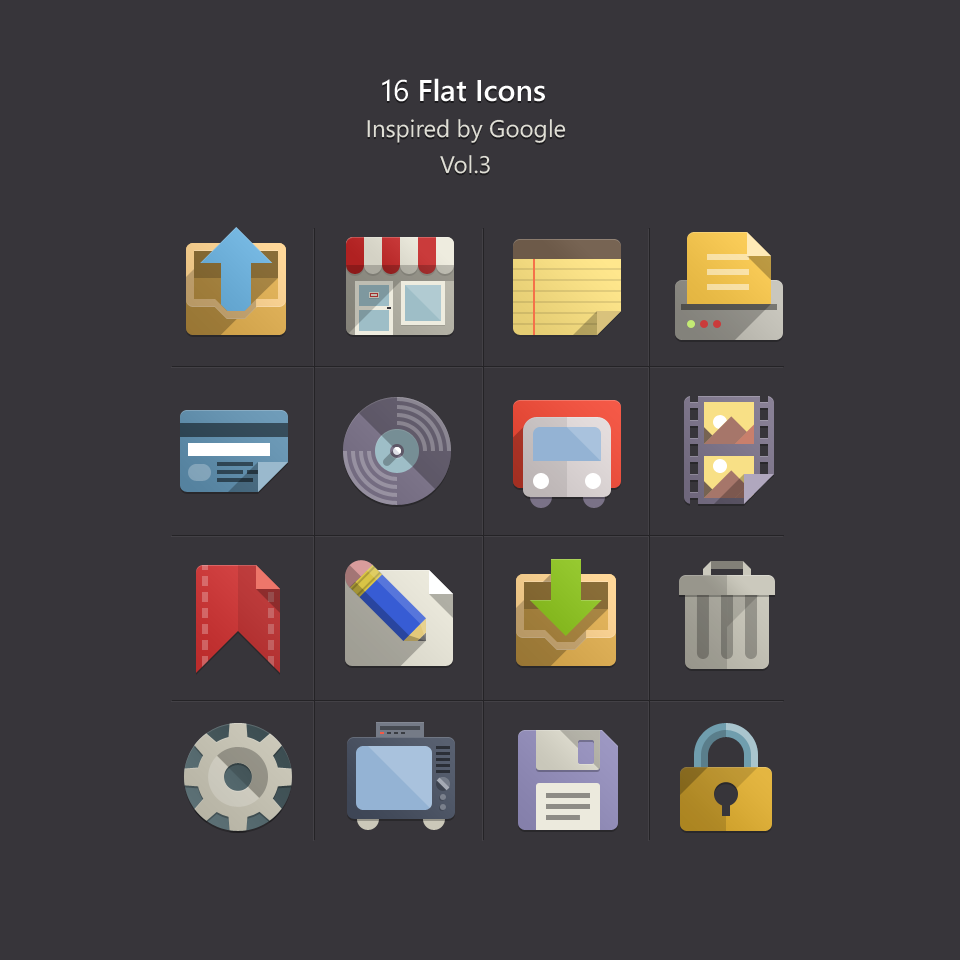
<style>
.page{position:relative;width:960px;height:960px;background:#37353a}
.page>*{position:absolute;margin:0}
.t1{font:24px/36px "SegoeWP";color:#e0dfd6}
.t2{font:30px/36px "SegoeWP";color:#ffffff}
.t3{font:30px/36px "SegoeWP-Semibold";color:#ffffff}
</style>
<div class="page">
<p class="t1" style="left:367px;top:78px;width:199px;height:96px;text-align:center"><span class="t2">16</span><span class="t3"> Flat Icons<br></span>Inspired by Google<br>Vol.3</p>
</div>
